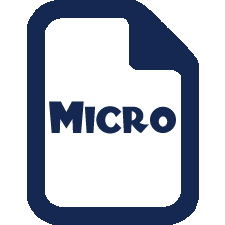
<style>
.page{position:relative;width:225px;height:225px;background:#ffffff}
.page>*{position:absolute;margin:0}
.t1{font:42px "BlitzkriegNF";color:#142851}
</style>
<div class="page">
<p class="t1" style="left:49px;top:101px;width:127px;height:33px">Micro</p>
</div>
